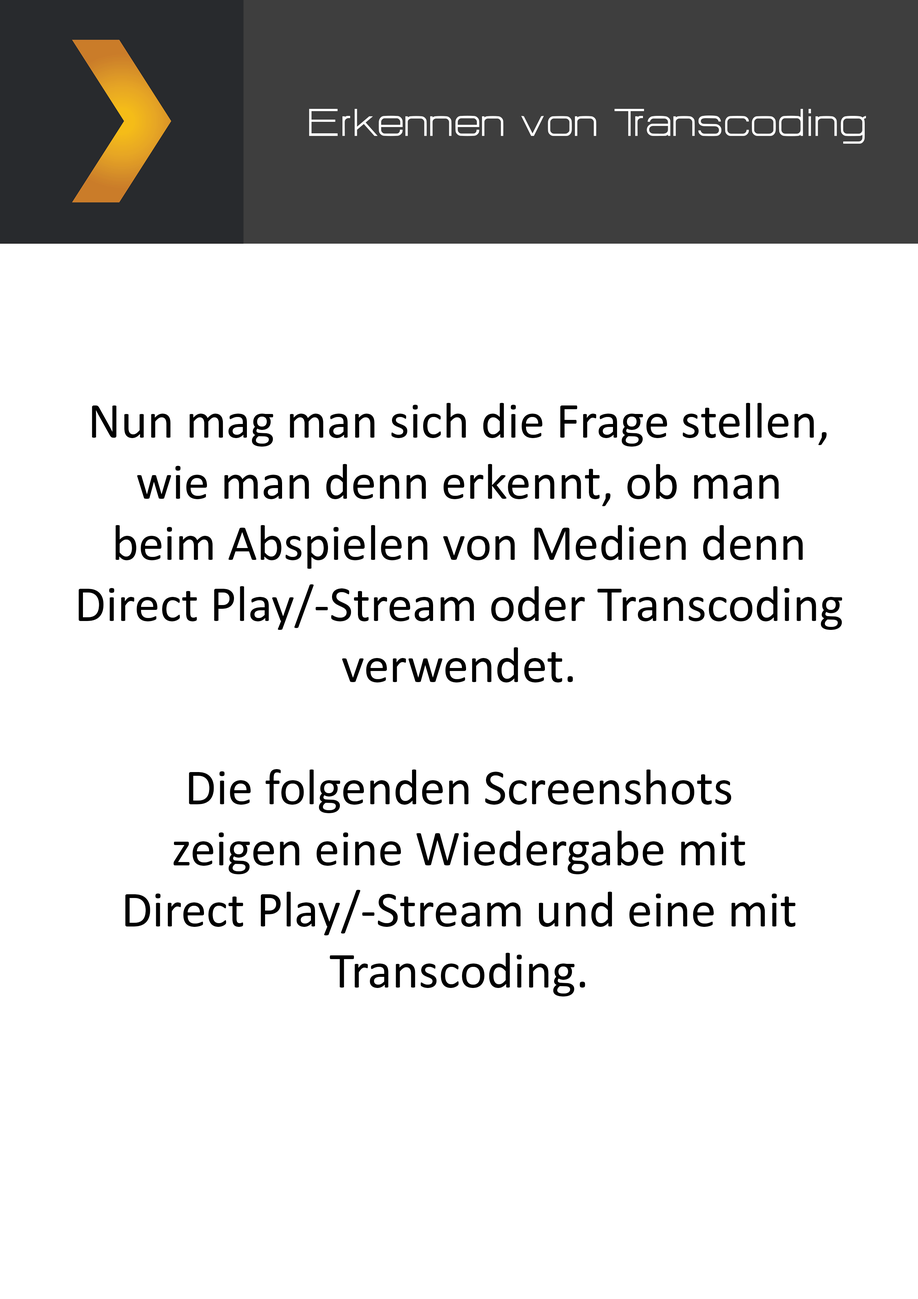
<style>
.page{position:relative;width:918px;height:1299px;background:#ffffff}
.page>*{position:absolute;margin:0}
.t1{font:47.8px "HURTMOLDPersonalUse-Regular";color:#ffffff}
.t2{font:50.9px "Calibri";color:#000000}
</style>
<div class="page">
<p class="t1" style="left:309px;top:109px;width:557px;height:35px">Erkennen von Transcoding</p>
<p class="t2" style="left:78px;top:403px;width:764px;height:593px;text-align:center">Nun mag man sich die Frage stellen,<br>wie man denn erkennt, ob man<br>beim Abspielen von Medien denn<br>Direct Play/-Stream oder Transcoding<br>verwendet.<br><br>Die folgenden Screenshots<br>zeigen eine Wiedergabe mit<br>Direct Play/-Stream und eine mit<br>Transcoding.</p>
</div>
